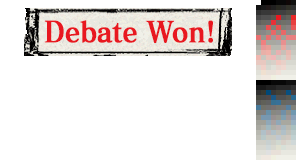
<style>
.page{position:relative;width:296px;height:160px;background:#ffffff}
.page>*{position:absolute;margin:0}
.t1{font:28.6px "MatissePro-B";letter-spacing:-0.025em;color:#e81820;font-weight:bold;scale:0.91 1}
</style>
<div class="page">
<p class="t1" style="left:44px;top:20px;width:169px;height:23px">Debate Won!</p>
</div>
